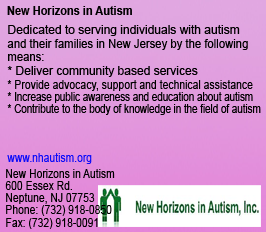
<style>
.page{position:relative;width:266px;height:232px}
.page>*{position:absolute;margin:0}
.t1{font:12px "Arial-BoldMT";color:#000000;scale:0.92 1}
.t2{font:12px "ArialMT";color:#000000}
.t3{font:12px "ArialMT";color:#000000;scale:0.94 1}
.t4{font:12px "ArialMT";color:#000000;scale:0.93 1}
.t5{font:12px "ArialMT";color:#000000;scale:0.87 1}
.t6{font:12px "ArialMT";color:#000000;scale:0.82 1}
.t7{font:12px "ArialMT";color:#0b0bf9;scale:0.86 1}
.t8{font:12px "ArialMT";color:#000000;scale:0.86 1}
</style>
<div class="page">
<p class="t1" style="left:7px;top:6px;width:125px;height:9px">New Horizons in Autism</p>
<p class="t2" style="left:8px;top:25px;width:232px;height:11px">Dedicated to serving individuals with autism</p>
<p class="t3" style="left:7px;top:39px;width:241px;height:11px">and their families in New Jersey by the following</p>
<p class="t4" style="left:8px;top:54px;width:36px;height:7px">means:</p>
<p class="t2" style="left:7px;top:66px;width:191px;height:11px">* Deliver community based services</p>
<p class="t5" style="left:7px;top:80px;width:246px;height:11px">* Provide advocacy, support and technical assistance</p>
<p class="t6" style="left:7px;top:92px;width:246px;height:11px">* Increase public awareness and education about autism</p>
<p class="t6" style="left:7px;top:104px;width:254px;height:11px">* Contribute to the body of knowledge in the field of autism</p>
<p class="t7" style="left:7px;top:153px;width:85px;height:11px">www.nhautism.org</p>
<p class="t8" style="left:6px;top:169px;width:109px;height:9px">New Horizons in Autism</p>
<p class="t8" style="left:5px;top:181px;width:67px;height:9px">600 Essex Rd.</p>
<p class="t8" style="left:6px;top:193px;width:89px;height:11px">Neptune, NJ 07753</p>
<p class="t8" style="left:6px;top:205px;width:106px;height:11px">Phone: (732) 918-0850</p>
<p class="t8" style="left:6px;top:218px;width:92px;height:11px">Fax: (732) 918-0091</p>
</div>
